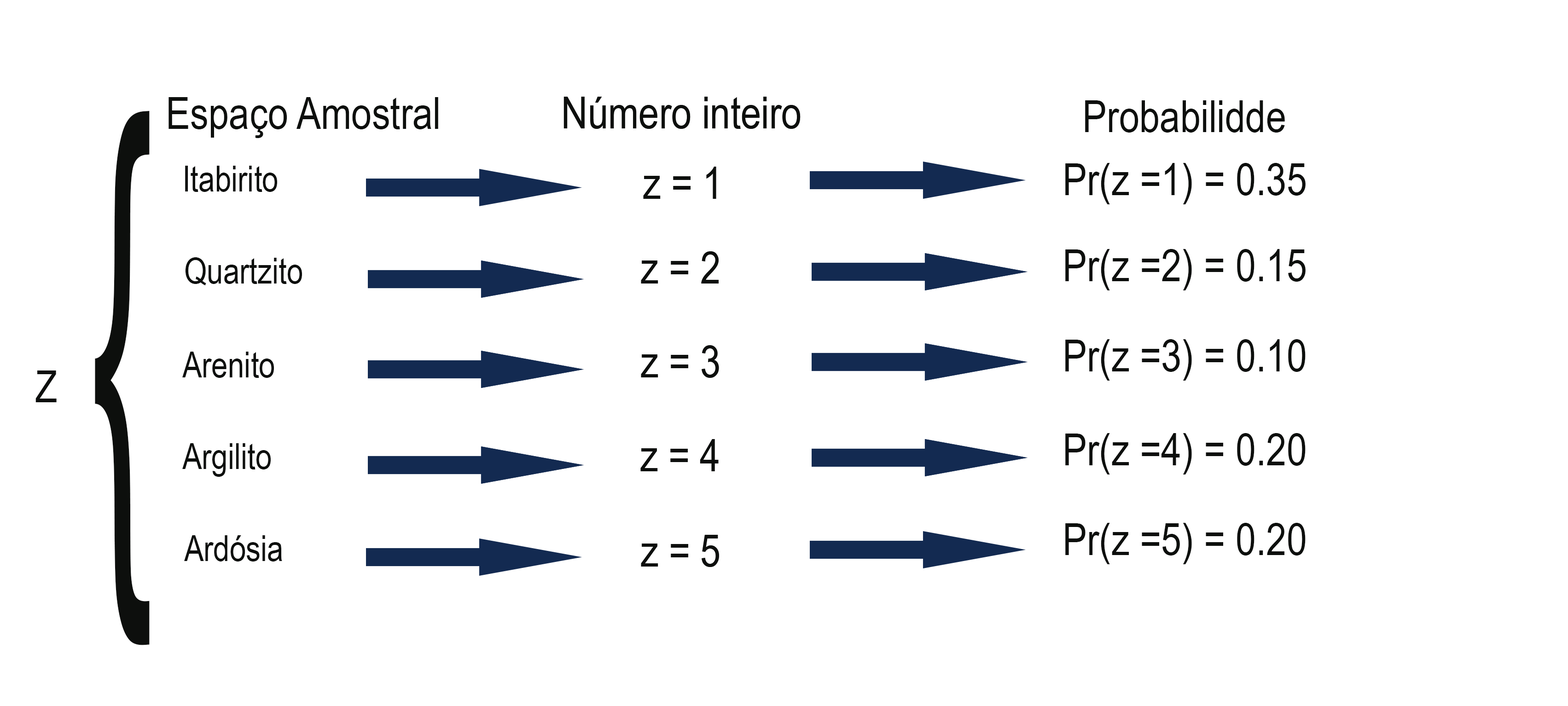
<style>
.page{position:relative;width:1568px;height:706px;background:#ffffff}
.page>*{position:absolute;margin:0}
.t1{font:76.7px "ArialNarrow";color:#0d0f0d}
.t2{font:975.6px "ArialNarrow";color:#0d0f0d;scale:0.41 1}
.t3{font:61.4px "ArialNarrow";color:#0d0f0d}
</style>
<div class="page">
<p class="t1" style="left:168px;top:97px;width:270px;height:41px">Espaço Amostral</p>
<p class="t1" style="left:563px;top:97px;width:238px;height:32px">Número inteiro</p>
<p class="t1" style="left:563px;top:97px;width:238px;height:32px">Número inteiro</p>
<p class="t1" style="left:1085px;top:100px;width:200px;height:33px">Probabilidde</p>
<p class="t2" style="left:95px;top:111px;width:55px;height:534px;rotate:-4deg">{</p>
<p class="t3" style="left:185px;top:166px;width:92px;height:26px">Itabirito</p>
<p class="t1" style="left:643px;top:167px;width:73px;height:32px">z = 1</p>
<p class="t1" style="left:643px;top:167px;width:73px;height:32px">z = 1</p>
<p class="t1" style="left:1065px;top:163px;width:241px;height:41px">Pr(z =1) = 0.35</p>
<p class="t3" style="left:185px;top:257px;width:117px;height:28px">Quartzito</p>
<p class="t1" style="left:641px;top:251px;width:78px;height:33px">z = 2</p>
<p class="t1" style="left:641px;top:251px;width:78px;height:33px">z = 2</p>
<p class="t1" style="left:1065px;top:249px;width:241px;height:41px">Pr(z =2) = 0.15</p>
<p class="t1" style="left:1065px;top:339px;width:241px;height:42px">Pr(z =3) = 0.10</p>
<p class="t3" style="left:182px;top:352px;width:92px;height:26px">Arenito</p>
<p class="t1" style="left:641px;top:345px;width:78px;height:33px">z = 3</p>
<p class="t1" style="left:641px;top:345px;width:78px;height:33px">z = 3</p>
<p class="t1" style="left:35px;top:371px;width:22px;height:31px">Z</p>
<p class="t1" style="left:1065px;top:433px;width:241px;height:42px">Pr(z =4) = 0.20</p>
<p class="t3" style="left:182px;top:443px;width:89px;height:34px">Argilito</p>
<p class="t1" style="left:640px;top:439px;width:79px;height:32px">z = 4</p>
<p class="t1" style="left:640px;top:439px;width:79px;height:32px">z = 4</p>
<p class="t1" style="left:1065px;top:523px;width:241px;height:41px">Pr(z =5) = 0.20</p>
<p class="t3" style="left:184px;top:535px;width:98px;height:27px">Ardósia</p>
<p class="t1" style="left:641px;top:535px;width:78px;height:32px">z = 5</p>
<p class="t1" style="left:641px;top:535px;width:78px;height:32px">z = 5</p>
</div>
